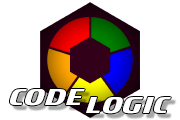
<style>
.page{position:relative;width:180px;height:120px;background:#ffffff}
.page>*{position:absolute;margin:0}
.t1{font:36px "Motorwerk";color:#ffffff}
</style>
<div class="page">
<p class="t1" style="left:10px;top:89px;width:75px;height:17px">Code</p>
<p class="t1" style="left:86px;top:97px;width:85px;height:17px">Logic</p>
</div>
